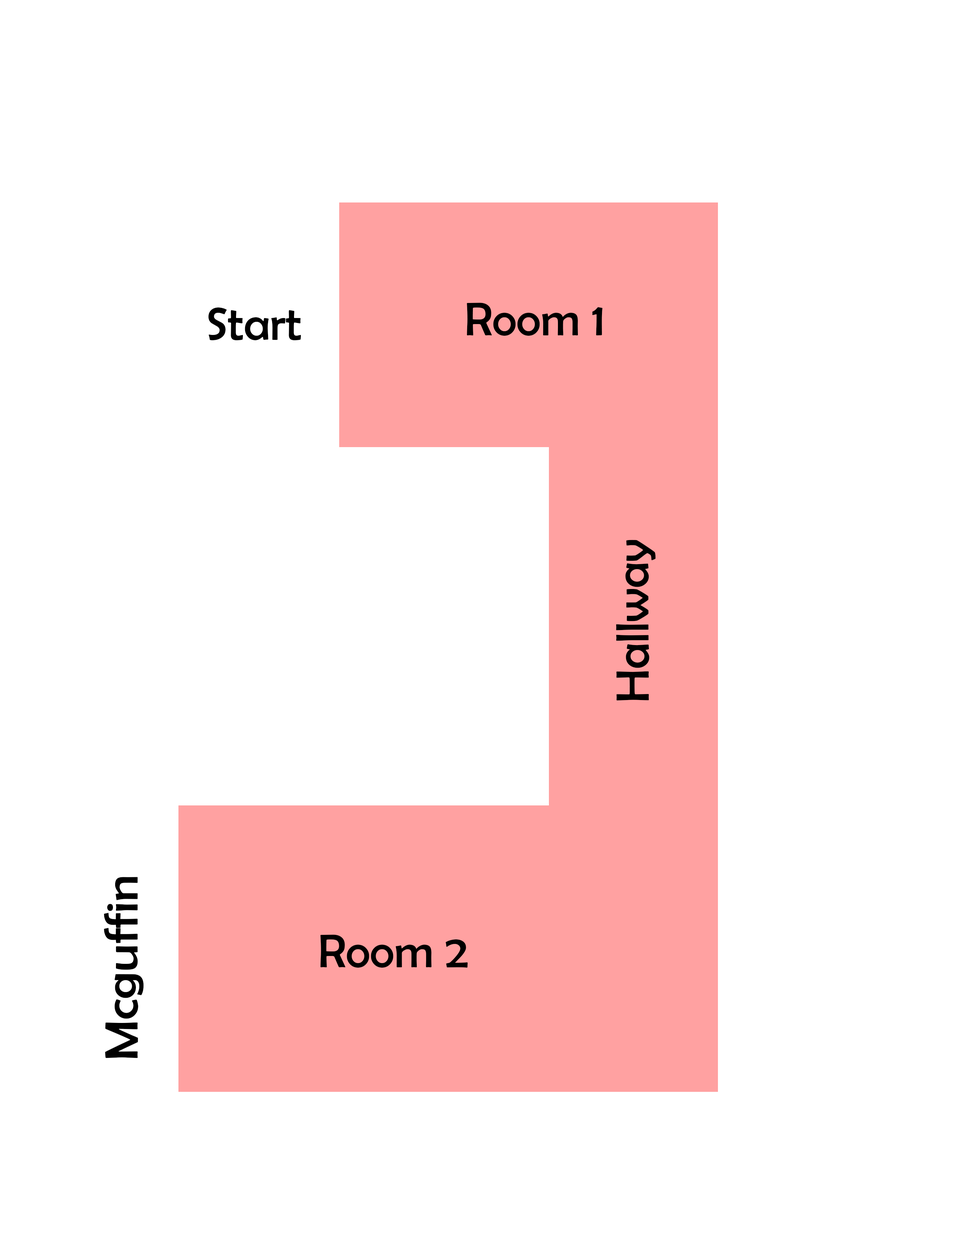
<style>
.page{position:relative;width:960px;height:1242px;background:#ffffff}
.page>*{position:absolute;margin:0}
.t1{font:47.1px "BerlinSansFB-Reg";color:#000000}
.t2{font:47.1px "BerlinSansFB-Reg";color:#000000;scale:1.1 1}
</style>
<div class="page">
<p class="t1" style="left:467px;top:303px;width:136px;height:33px">Room 1</p>
<p class="t1" style="left:208px;top:308px;width:93px;height:32px">Start</p>
<p class="t1" style="left:616px;top:540px;width:40px;height:161px;rotate:-90deg">Hallway</p>
<p class="t2" style="left:104px;top:877px;width:40px;height:181px;rotate:-90deg">Mcguffin</p>
<p class="t1" style="left:320px;top:935px;width:148px;height:33px">Room 2</p>
</div>
